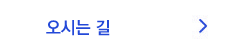
<style>
.page{position:relative;width:230px;height:52px;background:#ffffff}
.page>*{position:absolute;margin:0}
.t1{font:17px "KoPubDotumBold";color:#2449d8}
</style>
<div class="page">
<p class="t1" style="left:46px;top:20px;width:64px;height:16px">오시는 길</p>
</div>
